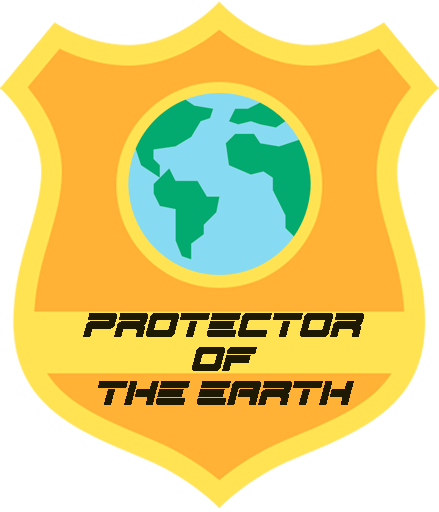
<style>
.page{position:relative;width:439px;height:512px;background:#ffb236}
.page>*{position:absolute;margin:0}
.t1{font:41.1px/33.9px "Spac3-Techv17-Italic";color:#1d1902}
</style>
<div class="page">
<p class="t1" style="left:83px;top:313px;width:281px;height:92px;text-align:center">protector<br>of<br>the earth</p>
</div>
